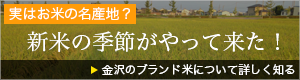
<style>
.page{position:relative;width:300px;height:80px}
.page>*{position:absolute;margin:0}
.t1{font:14px "HiraKakuProN-W3";letter-spacing:-0.01em;color:#ffffff}
.t2{font:22px "HiraMinPro-W3";letter-spacing:-0.01em;color:#ffffff}
.t3{font:11.5px "HiraKakuProN-W3";letter-spacing:-0.01em;color:#ffffff}
</style>
<div class="page">
<p class="t1" style="left:9px;top:7px;width:121px;height:13px">実はお米の名産地？</p>
<p class="t2" style="left:27px;top:31px;width:252px;height:21px">新米の季節がやって来た！</p>
<p class="t3" style="left:101px;top:64px;width:194px;height:11px">金沢のブランド米について詳しく知る</p>
</div>
